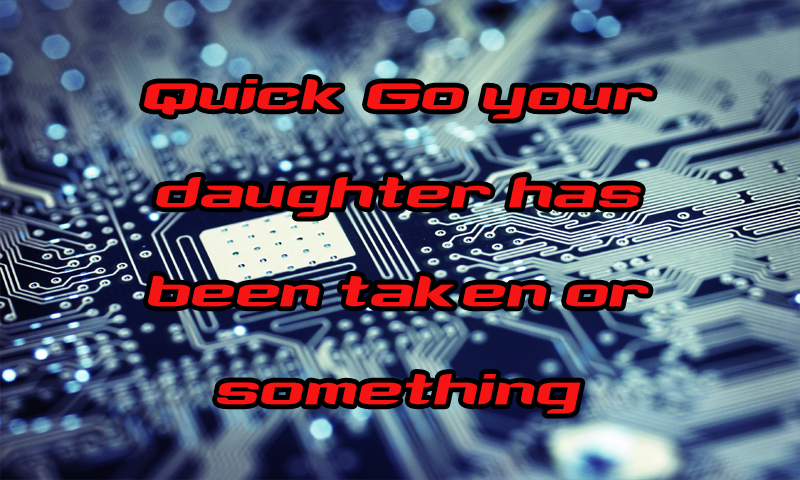
<style>
.page{position:relative;width:800px;height:480px}
.page>*{position:absolute;margin:0}
.t1{font:82px "AmazingSpider";color:#f61414}
</style>
<div class="page">
<p class="t1" style="left:144px;top:79px;width:509px;height:335px;text-align:center">Quick Go your daughter has been taken or something</p>
</div>
